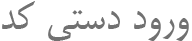
<style>
.page{position:relative;width:192px;height:41px;background:#ffffff}
.page>*{position:absolute;margin:0}
.t1{font:48px "BMitra";color:#717171}
</style>
<div class="page">
<p class="t1" style="left:2px;top:1px;width:187px;height:40px">ورود دستی کد</p>
</div>
